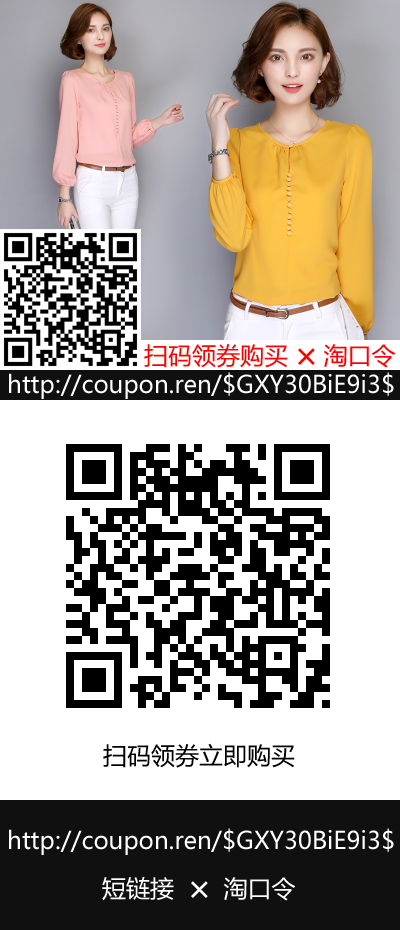
<style>
.page{position:relative;width:400px;height:930px;background:#ffffff}
.page>*{position:absolute;margin:0}
.t1{font:24px "MicrosoftYaHei";color:#ff0000}
.t2{font:36px "MicrosoftYaHei";color:#ff0000}
.t3{font:24px "MicrosoftYaHei";color:#ffffff}
.t4{font:24px "MicrosoftYaHei";color:#000000}
.t5{font:36px "MicrosoftYaHei";color:#ffffff}
</style>
<div class="page">
<p class="t1" style="left:144px;top:344px;width:252px;height:24px">扫码领券购买     淘口令</p>
<p class="t2" style="left:298px;top:348px;width:17px;height:17px">×</p>
<p class="t3" style="left:9px;top:372px;width:385px;height:27px">http://coupon.ren/$GXY30BiE9i3$</p>
<p class="t4" style="left:103px;top:743px;width:192px;height:25px">扫码领券立即购买</p>
<p class="t3" style="left:9px;top:828px;width:385px;height:27px">http://coupon.ren/$GXY30BiE9i3$</p>
<p class="t3" style="left:102px;top:876px;width:194px;height:25px">短链接       淘口令</p>
<p class="t5" style="left:191px;top:881px;width:17px;height:17px">×</p>
</div>
